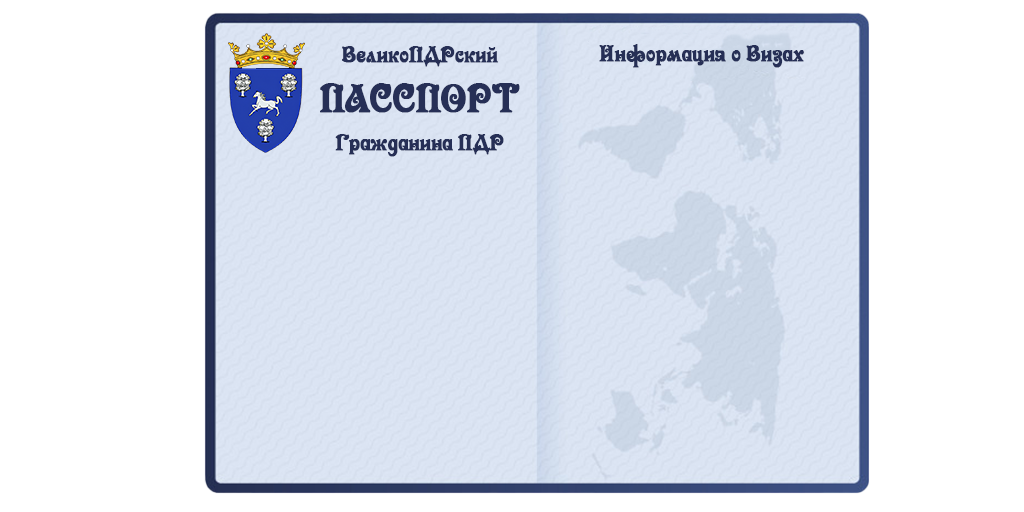
<style>
.page{position:relative;width:1024px;height:512px;background:#ffffff}
.page>*{position:absolute;margin:0}
.t1{font:24px/37.8px "NK123";letter-spacing:-0.04em;color:#262f56;font-weight:bold;scale:0.95 1}
.t2{font:24px/49.8px "NK123";letter-spacing:-0.04em;color:#262f56;font-weight:bold;scale:0.95 1}
.t3{font:42px/49.8px "NK123";letter-spacing:-0.04em;color:#262f56;font-weight:bold;scale:0.95 1}
.t4{font:24px "NK123";letter-spacing:-0.04em;color:#262f56;font-weight:bold;scale:0.95 1}
</style>
<div class="page">
<p class="t1" style="left:320px;top:46px;width:200px;height:111px;text-align:center"><span class="t2">ВеликоПДРский<br></span><span class="t3">ПАССПОРТ<br></span>Гражданина ПДР</p>
<p class="t4" style="left:599px;top:44px;width:205px;height:24px">Информация о Визах</p>
</div>
